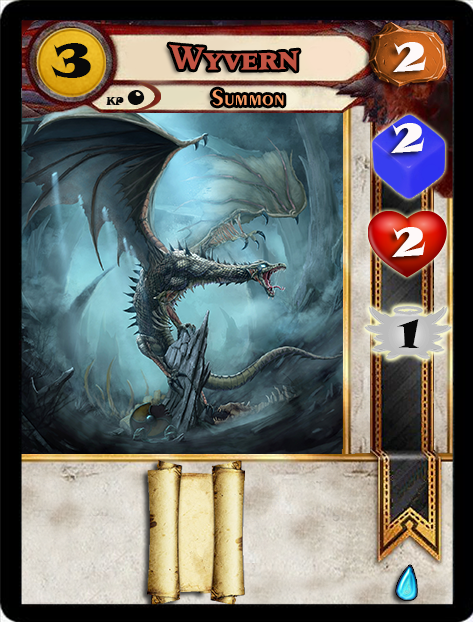
<style>
.page{position:relative;width:473px;height:622px}
.page>*{position:absolute;margin:0}
.t1{font:46.6px "SnapITC-Regular";color:#090909;scale:1.05 1}
.t2{font:40px "MatrixBoldSmallCaps";color:#c25443;scale:1.06 1}
.t3{font:40px "SnapITC-Regular";color:#fef9f9;scale:1.05 1}
.t4{font:22.7px "Exotic350BT-DemiBold";color:#f89c64;scale:1.06 1}
.t5{font:20.5px "SnapITC-Regular";color:#090909}
.t6{font:40px "SnapITC-Regular";color:#090909;scale:1.05 1}
</style>
<div class="page">
<p class="t1" style="left:51px;top:43px;width:40px;height:35px">3</p>
<p class="t2" style="left:169px;top:44px;width:130px;height:27px">Wyvern</p>
<p class="t3" style="left:393px;top:42px;width:34px;height:30px">2</p>
<p class="t4" style="left:212px;top:89px;width:72px;height:17px">Summon</p>
<p class="t5" style="left:127px;top:90px;width:18px;height:15px">0</p>
<p class="t3" style="left:391px;top:123px;width:34px;height:30px">2</p>
<p class="t3" style="left:392px;top:227px;width:34px;height:30px">2</p>
<p class="t6" style="left:397px;top:319px;width:22px;height:29px">1</p>
</div>
